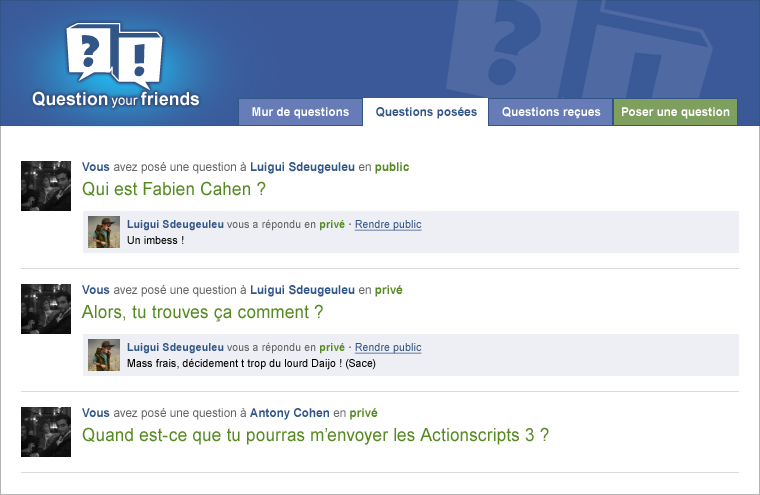
<style>
.page{position:relative;width:760px;height:495px;background:#ffffff}
.page>*{position:absolute;margin:0}
.t1{font:18px "Arial-BoldMT";letter-spacing:0.022em;color:#ffffff;scale:0.94 1}
.t2{font:14px "ArialMT";letter-spacing:0.022em;color:#ffffff;scale:0.94 1}
.t3{font:12px "Arial-BoldMT";letter-spacing:0.015em;color:#ffffff;scale:0.95 1}
.t4{font:12px "Arial-BoldMT";letter-spacing:0.015em;color:#325587;scale:0.95 1}
.t5{font:12px "ArialMT";letter-spacing:0.015em;color:#646464;scale:0.95 1}
.t6{font:12px "Arial-BoldMT";letter-spacing:0.015em;color:#558a22;scale:0.95 1}
.t7{font:18px "ArialMT";letter-spacing:0.015em;color:#558a22;scale:0.95 1}
.t8{font:11px/16px "Arial-BoldMT";letter-spacing:0.015em;color:#325587;scale:0.95 1}
.t9{font:11px/16px "ArialMT";letter-spacing:0.015em;color:#646464;scale:0.95 1}
.t10{font:11px/16px "Arial-BoldMT";letter-spacing:0.015em;color:#558a22;scale:0.95 1}
.t11{font:11px/16px "Arial-BoldMT";letter-spacing:0.015em;color:#646464;scale:0.95 1}
.t12{font:11px/16px "ArialMT";letter-spacing:0.015em;color:#325587;text-decoration:underline;scale:0.95 1}
.t13{font:11px/16px "ArialMT";letter-spacing:0.015em;color:#000000;scale:0.95 1}
</style>
<div class="page">
<p class="t1" style="left:32px;top:91px;width:167px;height:17px">Question <span class="t2">your </span>friends</p>
<p class="t3" style="left:252px;top:107px;width:97px;height:12px">Mur de questions</p>
<p class="t4" style="left:376px;top:107px;width:101px;height:12px">Questions posées</p>
<p class="t3" style="left:502px;top:107px;width:99px;height:12px">Questions reçues</p>
<p class="t3" style="left:622px;top:107px;width:108px;height:12px">Poser une question</p>
<p class="t5" style="left:82px;top:162px;width:327px;height:12px"><span class="t4">Vous</span> avez posé une question à <span class="t4">Luigui Sdeugeuleu</span> en <span class="t6">public</span></p>
<p class="t7" style="left:82px;top:181px;width:184px;height:15px">Qui est Fabien Cahen ?</p>
<p class="t8" style="left:127px;top:219px;width:295px;height:25px">Luigui Sdeugeuleu <span class="t9">vous a répondu en </span><span class="t10">privé</span><span class="t11"> · </span><span class="t12">Rendre public<br></span><span class="t13">Un imbess !</span></p>
<p class="t5" style="left:82px;top:285px;width:321px;height:12px"><span class="t4">Vous</span> avez posé une question à <span class="t4">Luigui Sdeugeuleu</span> en <span class="t6">privé</span></p>
<p class="t7" style="left:81px;top:304px;width:242px;height:18px">Alors, tu trouves ça comment ?</p>
<p class="t13" style="left:127px;top:342px;width:295px;height:28px"><span class="t8">Luigui Sdeugeuleu </span><span class="t9">vous a répondu en </span><span class="t10">privé</span><span class="t11"> · </span><span class="t12">Rendre public<br></span>Mass frais, décidement t trop du lourd Daijo ! (Sace)</p>
<p class="t5" style="left:82px;top:408px;width:296px;height:12px"><span class="t4">Vous</span> avez posé une question à <span class="t4">Antony Cohen</span> en <span class="t6">privé</span></p>
<p class="t7" style="left:82px;top:427px;width:467px;height:18px">Quand est-ce que tu pourras m’envoyer les Actionscripts 3 ?</p>
</div>
